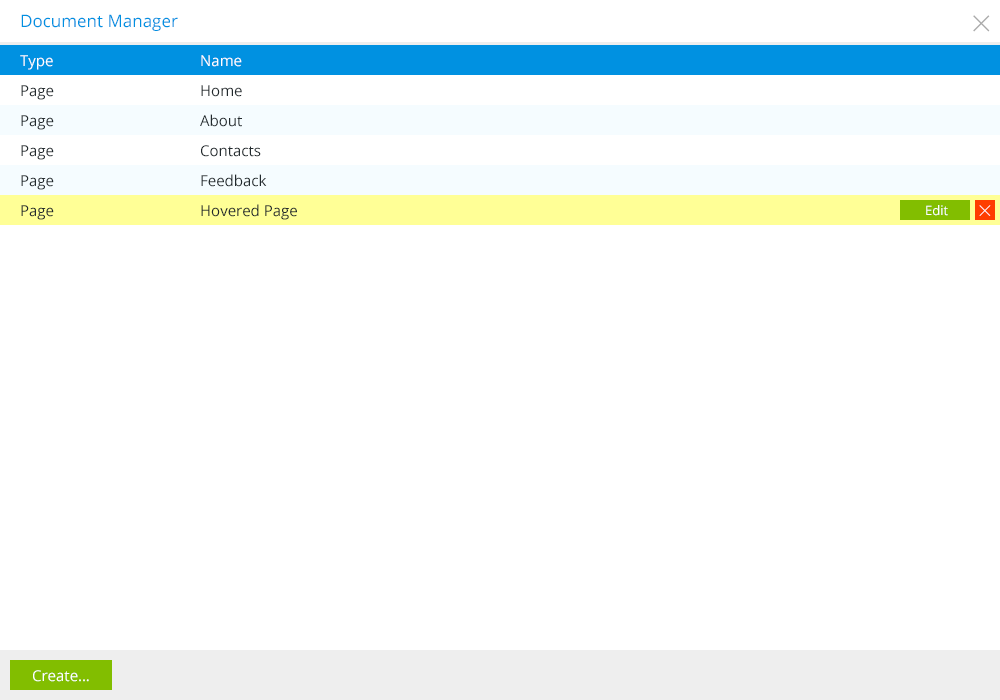
<style>
.page{position:relative;width:1000px;height:700px;background:#ffffff}
.page>*{position:absolute;margin:0}
.t1{font:17px "OpenSans";color:#0091e1}
.t2{font:36px "OpenSans-Light";color:#aaaaaa}
.t3{font:15px "OpenSans";color:#ffffff}
.t4{font:15px "OpenSans";color:#21292d}
.t5{font:13px "OpenSans";color:#ffffff}
.t6{font:24px "OpenSans-Light";color:#ffffff}
</style>
<div class="page">
<p class="t1" style="left:21px;top:14px;width:157px;height:17px">Document Manager</p>
<p class="t2" style="left:973px;top:15px;width:17px;height:17px">×</p>
<p class="t3" style="left:20px;top:55px;width:222px;height:15px">Type     Name</p>
<p class="t4" style="left:21px;top:85px;width:221px;height:15px">Page     Home</p>
<p class="t4" style="left:21px;top:114px;width:221px;height:16px">Page     About</p>
<p class="t4" style="left:21px;top:145px;width:240px;height:15px">Page     Contacts</p>
<p class="t4" style="left:21px;top:174px;width:246px;height:16px">Page     Feedback</p>
<p class="t4" style="left:21px;top:204px;width:276px;height:16px">Page     Hovered Page</p>
<p class="t5" style="left:926px;top:205px;width:22px;height:11px">Edit</p>
<p class="t6" style="left:979px;top:205px;width:12px;height:11px">×</p>
<p class="t3" style="left:33px;top:670px;width:56px;height:12px">Create…</p>
</div>
